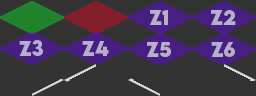
<style>
.page{position:relative;width:256px;height:96px;background:#333333}
.page>*{position:absolute;margin:0}
.t1{font:18.9px "LEMONMILK-Bold";color:#b7b0cc}
</style>
<div class="page">
<p class="t1" style="left:150px;top:10px;width:18px;height:15px">z1</p>
<p class="t1" style="left:211px;top:10px;width:25px;height:15px">z2</p>
<p class="t1" style="left:19px;top:40px;width:24px;height:16px">z3</p>
<p class="t1" style="left:82px;top:41px;width:27px;height:15px">z4</p>
<p class="t1" style="left:147px;top:42px;width:24px;height:15px">z5</p>
<p class="t1" style="left:211px;top:42px;width:24px;height:15px">z6</p>
</div>
